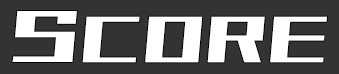
<style>
.page{position:relative;width:339px;height:74px;background:#333333}
.page>*{position:absolute;margin:0}
.t1{font:80px "851Gkktt";color:#ffffff}
.t2{font:90px "851Gkktt";color:#ffffff}
</style>
<div class="page">
<p class="t1" style="left:12px;top:11px;width:315px;height:52px"><span class="t2">S</span>CORE</p>
</div>
